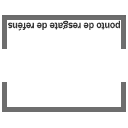
<style>
.page{position:relative;width:128px;height:128px;background:#ffffff}
.page>*{position:absolute;margin:0}
.t1{font:10.7px "FranklinGothic-Medium";letter-spacing:-0.02em;color:#383838;scale:0.97 1}
</style>
<div class="page">
<p class="t1" style="left:8px;top:20px;width:112px;height:11px;rotate:-180deg">ponto de resgate de reféns</p>
</div>
